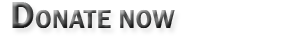
<style>
.page{position:relative;width:300px;height:45px;background:#ffffff}
.page>*{position:absolute;margin:0}
.t1{font:26px "FranklinGothic-Demi";letter-spacing:0.01em}
.t2{font:38px "FranklinGothic-Demi";letter-spacing:0.01em}
</style>
<div class="page">
<p class="t1" style="left:12px;top:2px;width:163px;height:27px"><span class="t2">D</span>ONATE NOW</p>
</div>
